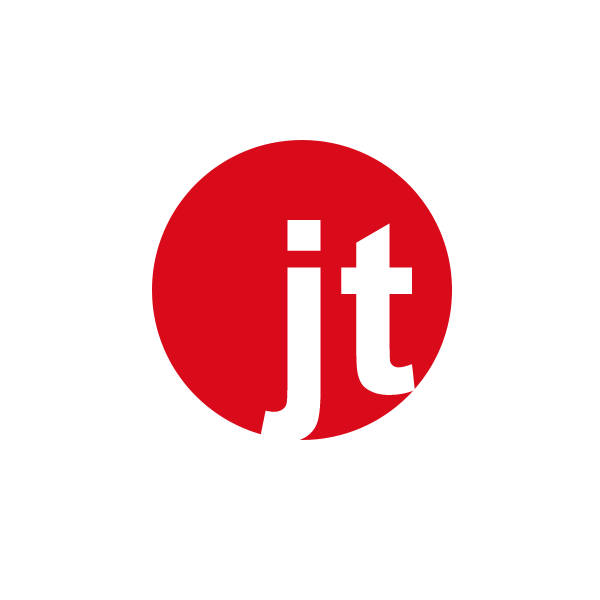
<style>
.page{position:relative;width:600px;height:600px;background:#ffffff}
.page>*{position:absolute;margin:0}
.t1{font:240px "Arial-BoldMT";color:#ffffff}
</style>
<div class="page">
<p class="t1" style="left:259px;top:220px;width:156px;height:223px">jt</p>
</div>
